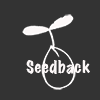
<style>
.page{position:relative;width:100px;height:100px;background:#333333}
.page>*{position:absolute;margin:0}
.t1{font:15.3px "MarkerFelt-Wide";color:#fcf8f8}
</style>
<div class="page">
<p class="t1" style="left:26px;top:60px;width:64px;height:14px">Seedback</p>
</div>
